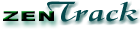
<style>
.page{position:relative;width:140px;height:30px;background:#ffffff}
.page>*{position:absolute;margin:0}
.t1{font:28.2px "Magik";letter-spacing:0.01em;color:#05494d;scale:1.64 1}
.t2{font:13.5px "Arial-Black";letter-spacing:0.05em;color:#000000;scale:1.64 1}
</style>
<div class="page">
<p class="t1" style="left:47px;top:1px;width:91px;height:21px">Track</p>
<p class="t2" style="left:3px;top:11px;width:51px;height:10px">ZEN</p>
</div>
